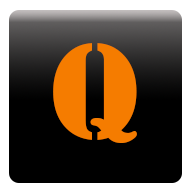
<style>
.page{position:relative;width:192px;height:192px;background:#000000}
.page>*{position:absolute;margin:0}
.t1{font:140px "Stencil";color:#f57c00}
</style>
<div class="page">
<p class="t1" style="left:53px;top:43px;width:84px;height:100px">Q</p>
</div>
